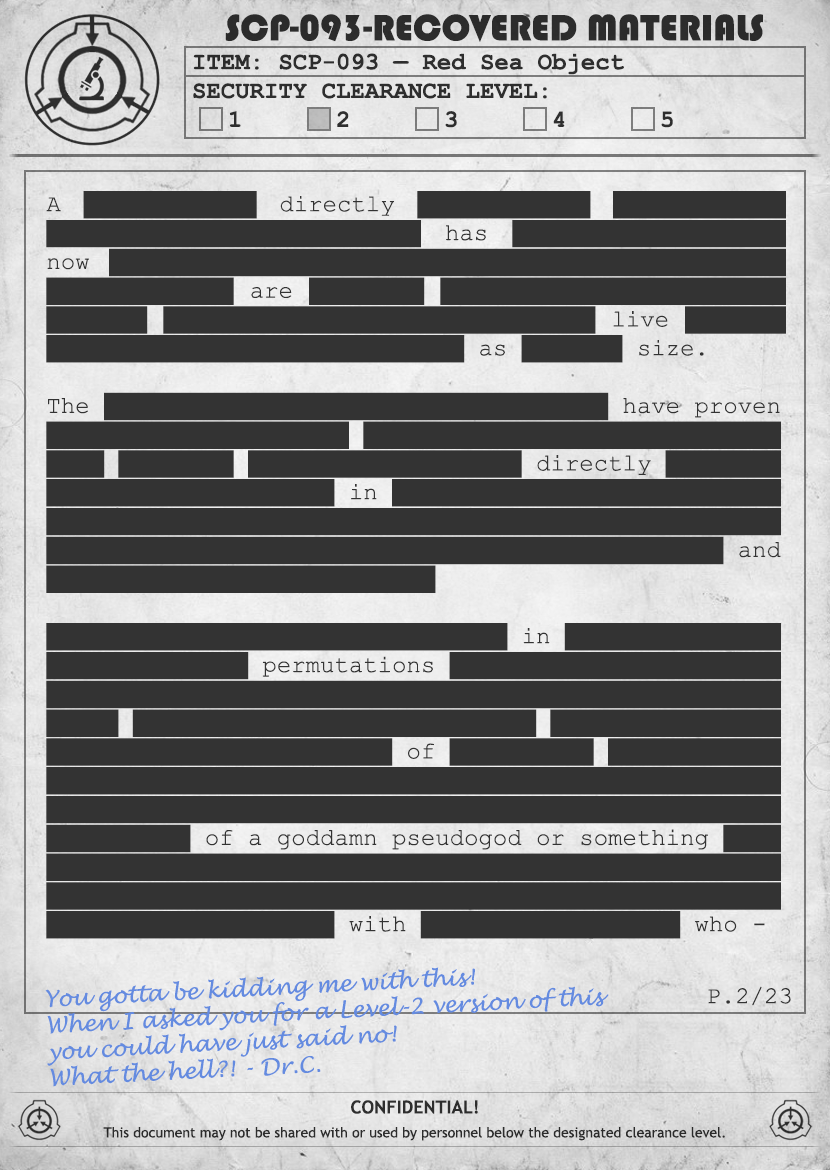
<style>
.page{position:relative;width:830px;height:1170px;background:#333333}
.page>*{position:absolute;margin:0}
.t1{font:38px "Bauhaus93";color:#333333;text-transform:uppercase}
.t2{font:24px "CourierNewPS-BoldMT";color:#333333}
.t3{font:24px "CourierNewPS-BoldMT";color:#333333;text-transform:uppercase}
.t4{font:24px "CourierNewPSMT";color:#333333}
.t5{font:22px "LucidaHandwriting-Italic";color:#648be0}
.t6{font:24px "CourierNewPSMT";color:#333333;text-transform:uppercase}
.t7{font:14px/24px "TrebuchetMS";color:#333333}
.t8{font:18px/24px "TrebuchetMS-Bold";color:#333333}
</style>
<div class="page">
<p class="t1" style="left:225px;top:14px;width:538px;height:28px">SCP-093-Recovered materials</p>
<p class="t2" style="left:193px;top:53px;width:480px;height:75px">ITEM: SCP-093 — Red Sea Object<br><span class="t3">Security CLEARANCE LEVEL:</span> <br> 1   2   3   4   5</p>
<p class="t4" style="left:46px;top:191px;width:740px;height:748px;text-align:justify">A ████████████ directly ████████████ ████████████ ██████████████████████████ has ███████████████████ now ███████████████████████████████████████████████ █████████████ are ████████ ████████████████████████ ███████ ██████████████████████████████ live ███████ █████████████████████████████ as ███████ size.<br><br>The ███████████████████████████████████ have proven <br>█████████████████████ █████████████████████████████<br>████ ████████ ███████████████████ directly ████████<br>████████████████████ in ███████████████████████████ <br>███████████████████████████████████████████████████<br>███████████████████████████████████████████████ and<br>███████████████████████████<br><br>████████████████████████████████ in ███████████████<br>██████████████ permutations ███████████████████████<br>███████████████████████████████████████████████████<br>█████ ████████████████████████████ ████████████████<br>████████████████████████ of ██████████ ████████████<br>███████████████████████████████████████████████████<br>███████████████████████████████████████████████████<br>██████████ of a goddamn pseudogod or something ████<br>███████████████████████████████████████████████████<br>███████████████████████████████████████████████████ <br>████████████████████ with ██████████████████ who -</p>
<p class="t5" style="left:45px;top:967px;width:564px;height:120px;text-align:justify;rotate:-3deg">You gotta be kidding me with this! <br>When I asked you for a Level-2 version of this <br>you could have just said no! <br>What the hell?! - Dr.C.</p>
<p class="t6" style="left:708px;top:986px;width:83px;height:20px">P.2/23</p>
<p class="t7" style="left:103px;top:1100px;width:622px;height:41px;text-align:center"><span class="t8">CONFIDENTIAL!<br></span>This document may not be shared with or used by personnel below the designated clearance level.</p>
</div>
